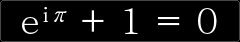
<style>
.page{position:relative;width:240px;height:42px;background:#000000}
.page>*{position:absolute;margin:0}
.t1{font:36px "AdobeMyungjoStd-Medium";color:#ffffff}
.t2{font:20.6px "AdobeMyungjoStd-Medium";color:#ffffff;scale:1.1 1}
</style>
<div class="page">
<p class="t1" style="left:22px;top:17px;width:16px;height:17px">e</p>
<p class="t2" style="left:43px;top:7px;width:24px;height:15px">iπ</p>
<p class="t1" style="left:82px;top:8px;width:135px;height:26px">+ 1 = 0</p>
</div>
